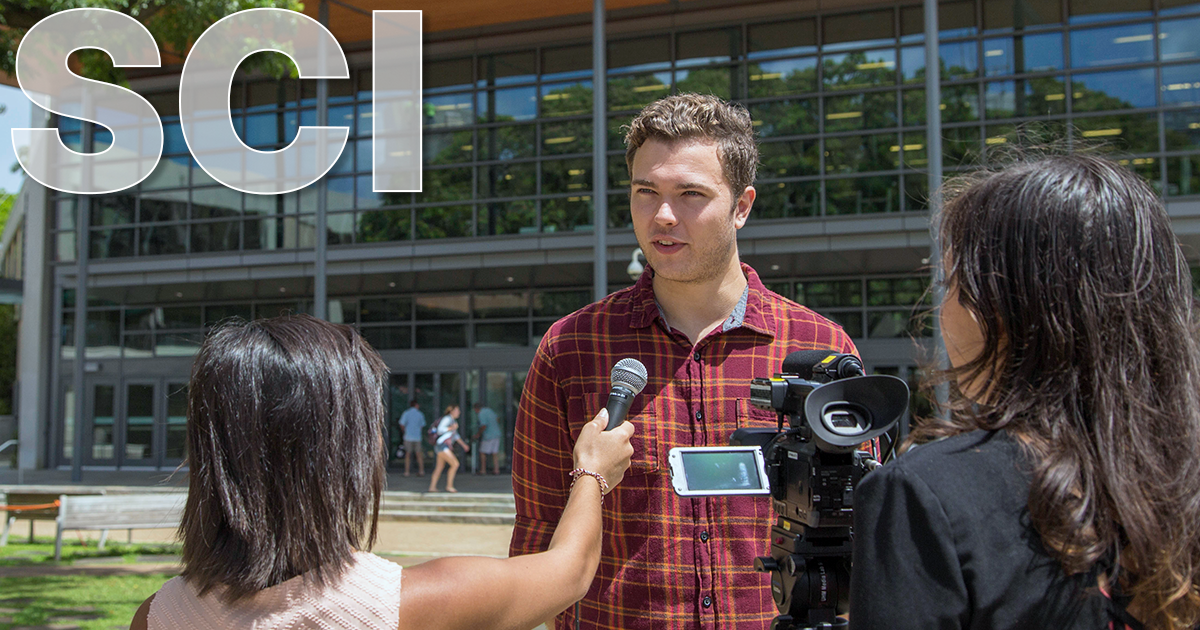
<style>
.page{position:relative;width:1200px;height:630px}
.page>*{position:absolute;margin:0}
.t1{font:250px "Inter-Black";color:#acb0ad}
</style>
<div class="page">
<p class="t1" style="left:11px;top:7px;width:412px;height:188px">SCI</p>
</div>
